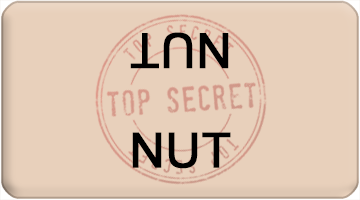
<style>
.page{position:relative;width:360px;height:200px;background:#e8d0bb}
.page>*{position:absolute;margin:0}
.t1{font:48px "ArialMT";color:#000000;font-weight:bold}
</style>
<div class="page">
<p class="t1" style="left:130px;top:32px;width:99px;height:37px;rotate:180deg">NUT</p>
<p class="t1" style="left:132px;top:132px;width:99px;height:37px">NUT</p>
</div>
